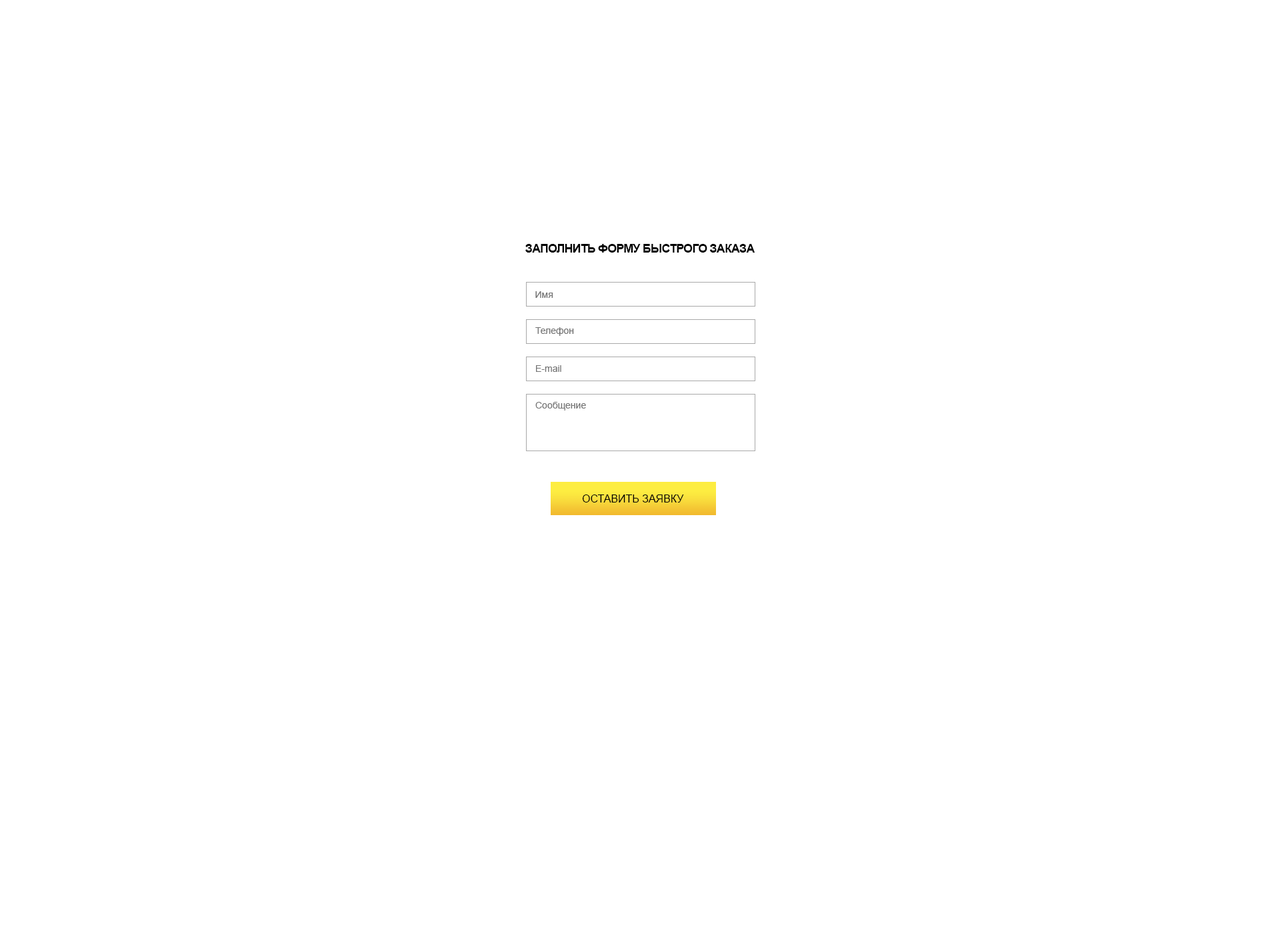
<style>
.page{position:relative;width:1280px;height:931px;background:#ffffff}
.page>*{position:absolute;margin:0}
.t1{font:12px "Arial-BoldMT";letter-spacing:-0.05em;color:#000000;text-transform:uppercase}
.t2{font:9.3px "ArialMT";color:#757575}
.t3{font:10.7px "ArialMT";color:#000000;text-transform:uppercase}
</style>
<div class="page">
<p class="t1" style="left:525px;top:244px;width:230px;height:9px">Заполнить форму быстрого заказа</p>
<p class="t2" style="left:535px;top:291px;width:18px;height:7px">Имя</p>
<p class="t2" style="left:535px;top:327px;width:39px;height:9px">Телефон</p>
<p class="t2" style="left:536px;top:365px;width:25px;height:7px">E-mail</p>
<p class="t2" style="left:535px;top:402px;width:51px;height:9px">Сообщение</p>
<p class="t3" style="left:582px;top:495px;width:102px;height:8px">ОСТАВИТЬ ЗАЯВКУ</p>
</div>
